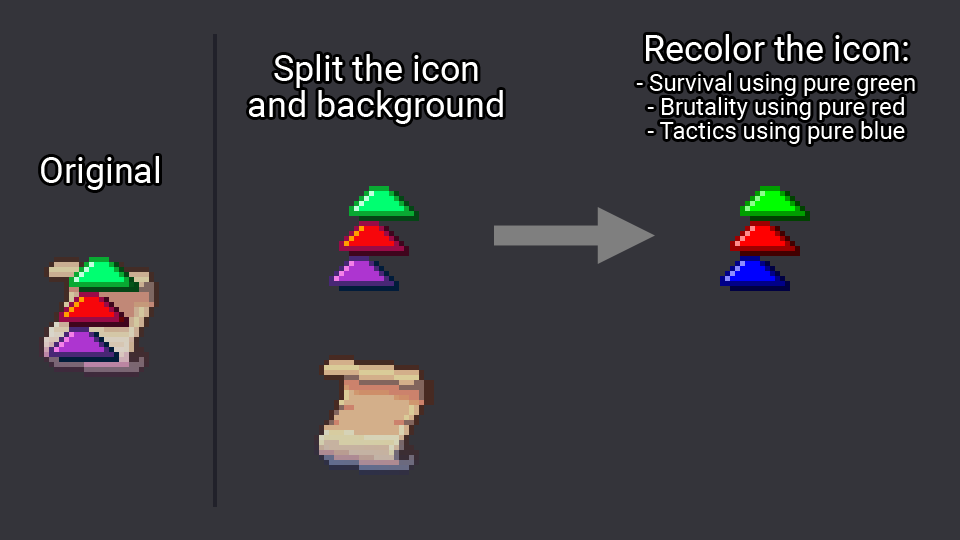
<style>
.page{position:relative;width:960px;height:540px;background:#34343a}
.page>*{position:absolute;margin:0}
.t1{font:24px/24px "Roboto-Regular";color:#ffffff}
.t2{font:36px/24px "Roboto-Regular";color:#ffffff}
.t3{font:36px/30px "Roboto-Regular";color:#ffffff}
.t4{font:24px/30px "Roboto-Regular";color:#ffffff}
.t5{font:36px/36px "Roboto-Regular";color:#ffffff}
.t6{font:36px "Roboto-Regular";color:#ffffff}
</style>
<div class="page">
<p class="t1" style="left:636px;top:34px;width:279px;height:110px;text-align:center"><span class="t2">Recol</span><span class="t3">or the icon:<br></span><span class="t4">- Survival u</span>sing pure green<br>- Brutality using pure red<br>- Tactics using pure blue</p>
<p class="t5" style="left:248px;top:54px;width:255px;height:70px;text-align:center">Split the icon<br>and background</p>
<p class="t6" style="left:41px;top:156px;width:118px;height:34px">Original</p>
</div>
